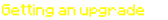
<style>
.page{position:relative;width:168px;height:20px;background:#ffffff}
.page>*{position:absolute;margin:0}
.t1{font:12.5px "Minecraftia-Regular";color:#fffb00}
</style>
<div class="page">
<p class="t1" style="left:1px;top:4px;width:144px;height:13px">Getting an upgrade</p>
</div>
